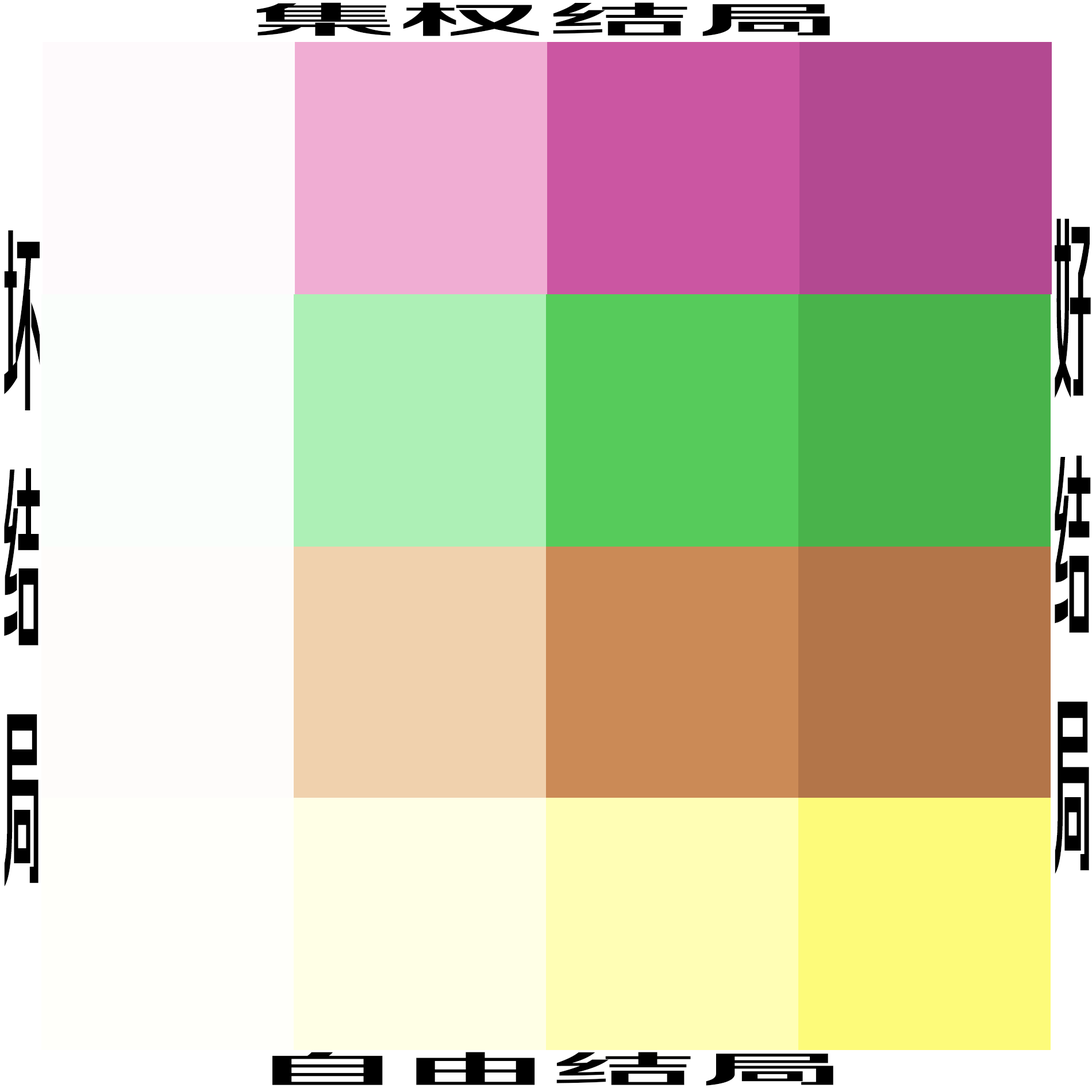
<style>
.page{position:relative;width:1092px;height:1092px}
.page>*{position:absolute;margin:0}
.t1{font:36.8px "FZRUIZHK_ZHONG--GBK1-0";color:#000000;scale:4.03 1}
.t2{font:198.3px "FZRUIZHK_ZHONG--GBK1-0";color:#000000;scale:0.2 1}
</style>
<div class="page">
<p class="t1" style="left:256px;top:2px;width:574px;height:34px">集权结局</p>
<p class="t2" style="left:1055px;top:218px;width:36px;height:656px;text-align:center">好<br>结<br>局</p>
<p class="t2" style="left:4px;top:230px;width:36px;height:656px;text-align:center">坏<br>结<br>局</p>
<p class="t1" style="left:272px;top:1052px;width:561px;height:34px">自由结局</p>
</div>
